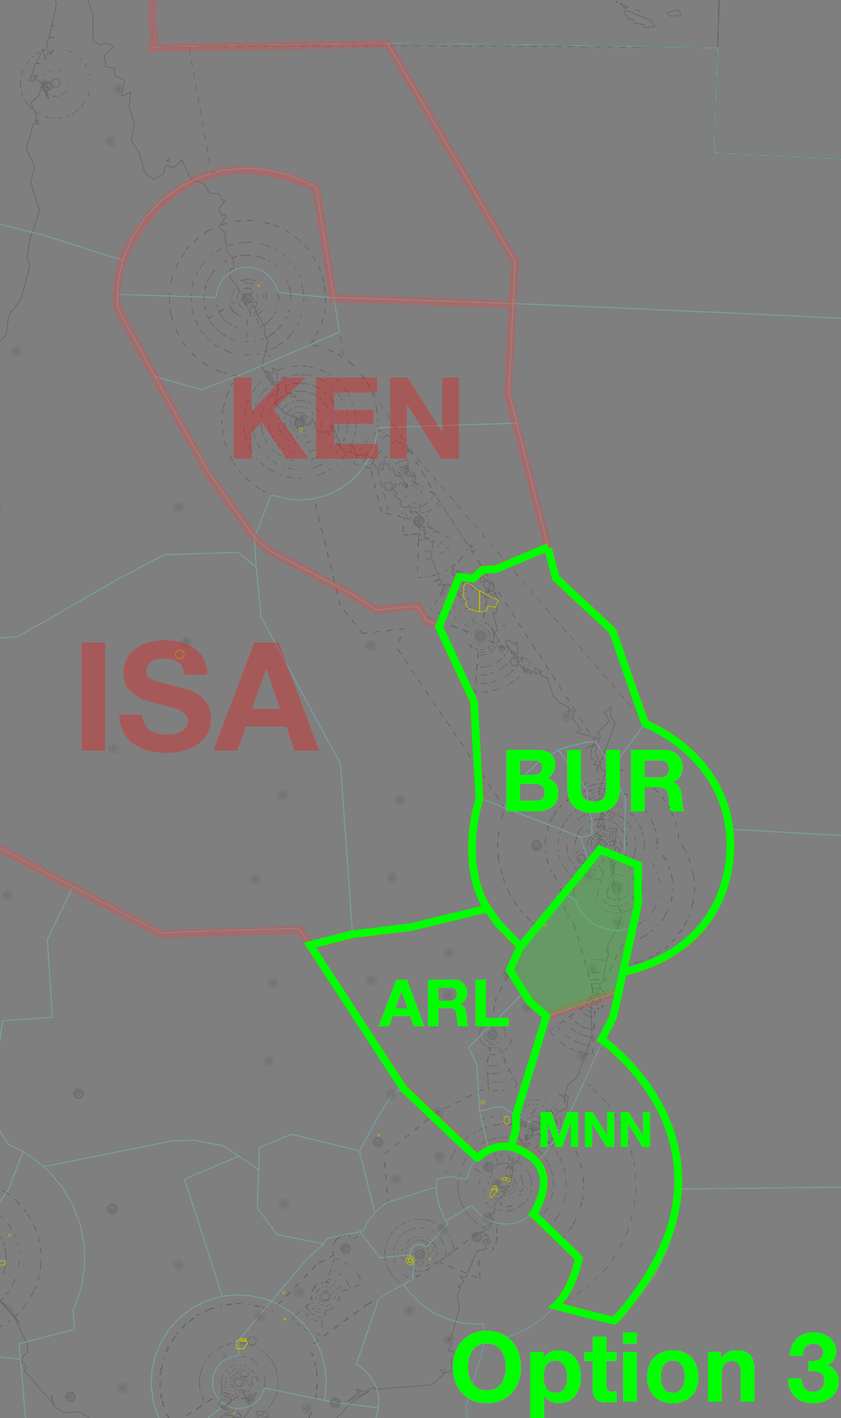
<style>
.page{position:relative;width:841px;height:1418px;background:#7f7f7f}
.page>*{position:absolute;margin:0}
.t1{font:113.7px "HelveticaNeueLTStd-Bd";color:#a65959}
.t2{font:151.6px "HelveticaNeueLTStd-Bd";color:#a65959}
.t3{font:86.2px "HelveticaNeueLTStd-Bd";color:#00ff00}
.t4{font:65.4px "HelveticaNeueLTStd-Bd";color:#00ff00}
.t5{font:49px "HelveticaNeueLTStd-Bd";color:#00ff00}
.t6{font:96.6px "HelveticaNeueLTStd-Bd";color:#00ff00}
</style>
<div class="page">
<p class="t1" style="left:234px;top:378px;width:225px;height:81px">KEN</p>
<p class="t2" style="left:81px;top:640px;width:238px;height:113px">ISA</p>
<p class="t3" style="left:506px;top:750px;width:178px;height:63px">BUR</p>
<p class="t4" style="left:378px;top:980px;width:131px;height:46px">ARL</p>
<p class="t5" style="left:540px;top:1112px;width:110px;height:35px">MNN</p>
<p class="t6" style="left:452px;top:1331px;width:387px;height:89px">Option 3</p>
</div>
